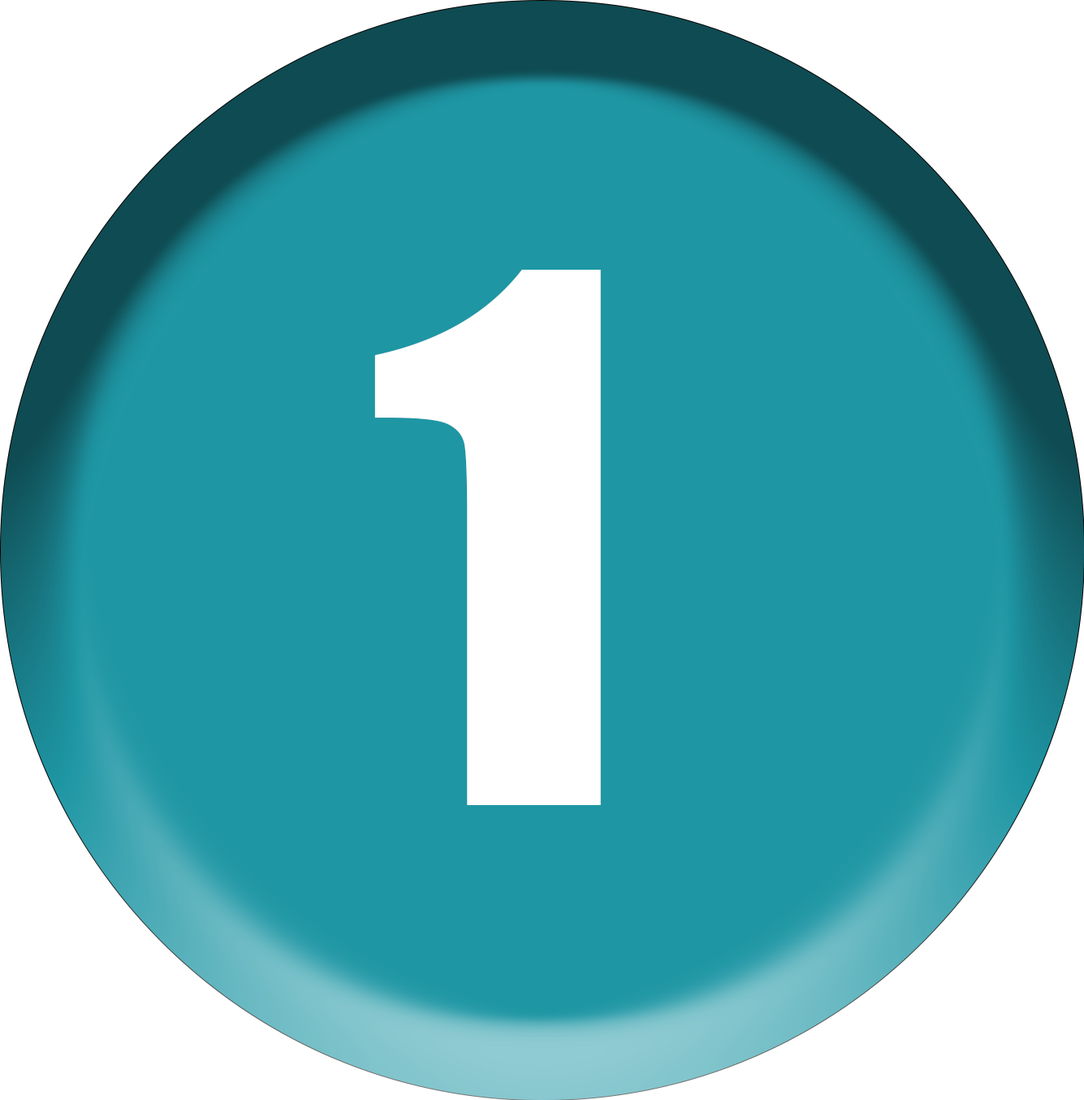
<style>
.page{position:relative;width:1084px;height:1100px;background:#1e96a4}
.page>*{position:absolute;margin:0}
.t1{font:676.8px "Impact";color:#ffffff}
</style>
<div class="page">
<p class="t1" style="left:374px;top:270px;width:227px;height:535px">1</p>
</div>
